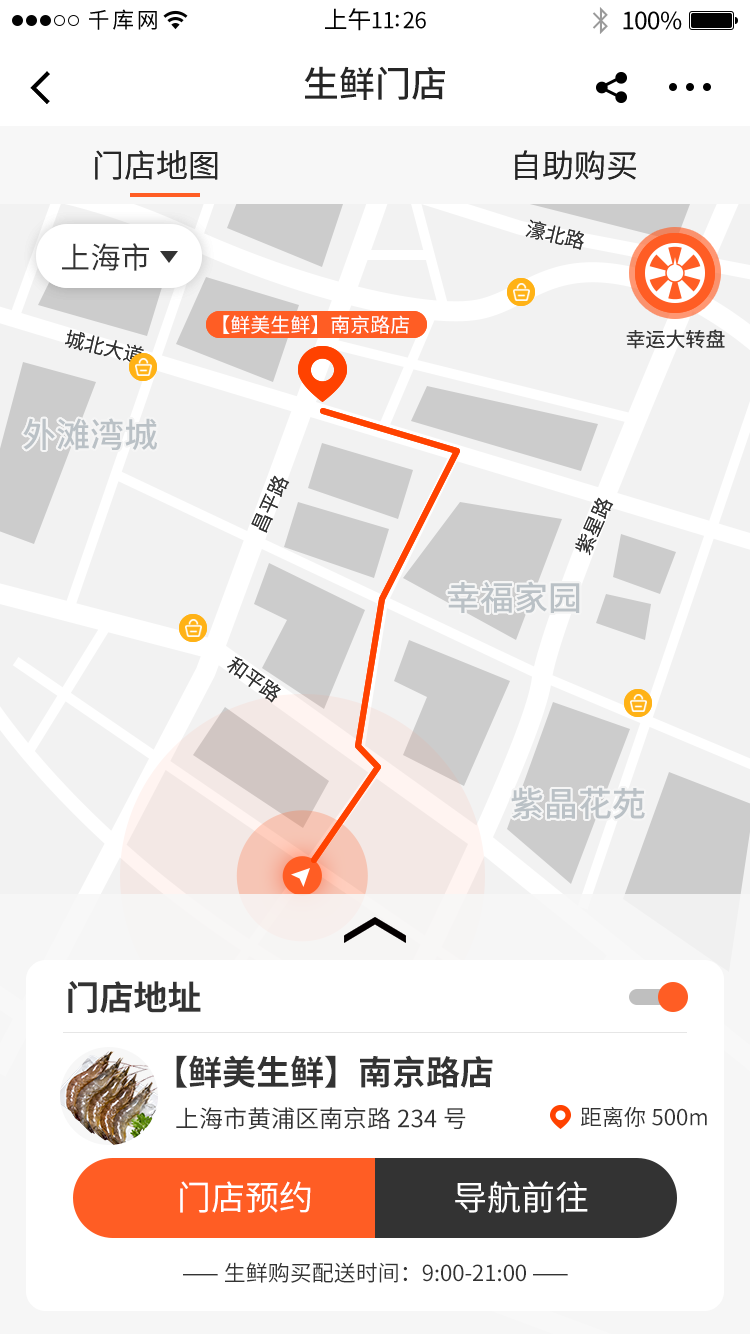
<style>
.page{position:relative;width:750px;height:1334px;background:#ffffff}
.page>*{position:absolute;margin:0}
.t1{font:22px "SourceHanSansCN-Regular";letter-spacing:0.12em;color:#030303}
.t2{font:22px "SourceHanSansCN-Regular";letter-spacing:-0.02em;color:#030303}
.t3{font:24px "SourceHanSansCN-Regular";letter-spacing:-0.02em;color:#030303}
.t4{font:36px "SourceHanSansCN-Medium";color:#262626}
.t5{font:32px "SourceHanSansCN-Regular";color:#262626}
.t6{font:20px "SourceHanSansCN-Regular";color:#333333}
.t7{font:30px "SourceHanSansCN-Regular";color:#333333}
.t8{font:20px "SourceHanSansCN-Regular";color:#ffffff}
.t9{font:34px "SourceHanSansCN-Medium";color:#bac1c6}
.t10{font:34px "SourceHanSansCN-Bold";color:#333333}
.t11{font:24px "SourceHanSansCN-Regular";color:#333333}
.t12{font:22px "SourceHanSansCN-Regular";color:#333333}
.t13{font:34px "SourceHanSansCN-Regular";color:#ffffff}
</style>
<div class="page">
<p class="t1" style="left:89px;top:9px;width:68px;height:21px">千库网</p>
<p class="t2" style="left:325px;top:8px;width:101px;height:23px"><span class="t3">上午</span>11:26</p>
<p class="t3" style="left:623px;top:11px;width:59px;height:19px">100%</p>
<p class="t4" style="left:304px;top:66px;width:141px;height:34px">生鲜门店</p>
<p class="t5" style="left:95px;top:150px;width:123px;height:30px">门店地图</p>
<p class="t5" style="left:515px;top:150px;width:121px;height:30px">自助购买</p>
<p class="t6" style="left:525px;top:219px;width:59px;height:31px;rotate:13deg">濠北路</p>
<p class="t7" style="left:62px;top:243px;width:87px;height:28px">上海市</p>
<p class="t8" style="left:223px;top:315px;width:186px;height:19px">【鲜美生鲜】南京路店</p>
<p class="t6" style="left:65px;top:329px;width:79px;height:36px;rotate:13deg">城北大道</p>
<p class="t6" style="left:626px;top:329px;width:99px;height:20px">幸运大转盘</p>
<p class="t9" style="left:23px;top:418px;width:134px;height:33px">外滩湾城</p>
<p class="t6" style="left:251px;top:475px;width:39px;height:58px;rotate:-66deg">昌平路</p>
<p class="t6" style="left:575px;top:497px;width:39px;height:59px;rotate:-66deg">紫星路</p>
<p class="t9" style="left:447px;top:581px;width:133px;height:32px">幸福家园</p>
<p class="t6" style="left:227px;top:656px;width:54px;height:47px;rotate:35deg">和平路</p>
<p class="t9" style="left:511px;top:787px;width:134px;height:33px">紫晶花苑</p>
<p class="t10" style="left:68px;top:981px;width:133px;height:32px">门店地址</p>
<p class="t10" style="left:176px;top:1055px;width:317px;height:33px">【鲜美生鲜】南京路店</p>
<p class="t11" style="left:176px;top:1106px;width:290px;height:24px">上海市黄浦区南京路234号</p>
<p class="t12" style="left:581px;top:1106px;width:126px;height:21px">距离你500m</p>
<p class="t13" style="left:180px;top:1181px;width:131px;height:32px">门店预约</p>
<p class="t13" style="left:455px;top:1181px;width:133px;height:32px">导航前往</p>
<p class="t12" style="left:183px;top:1262px;width:385px;height:21px">—— 生鲜购买配送时间：9:00-21:00 ——</p>
</div>
